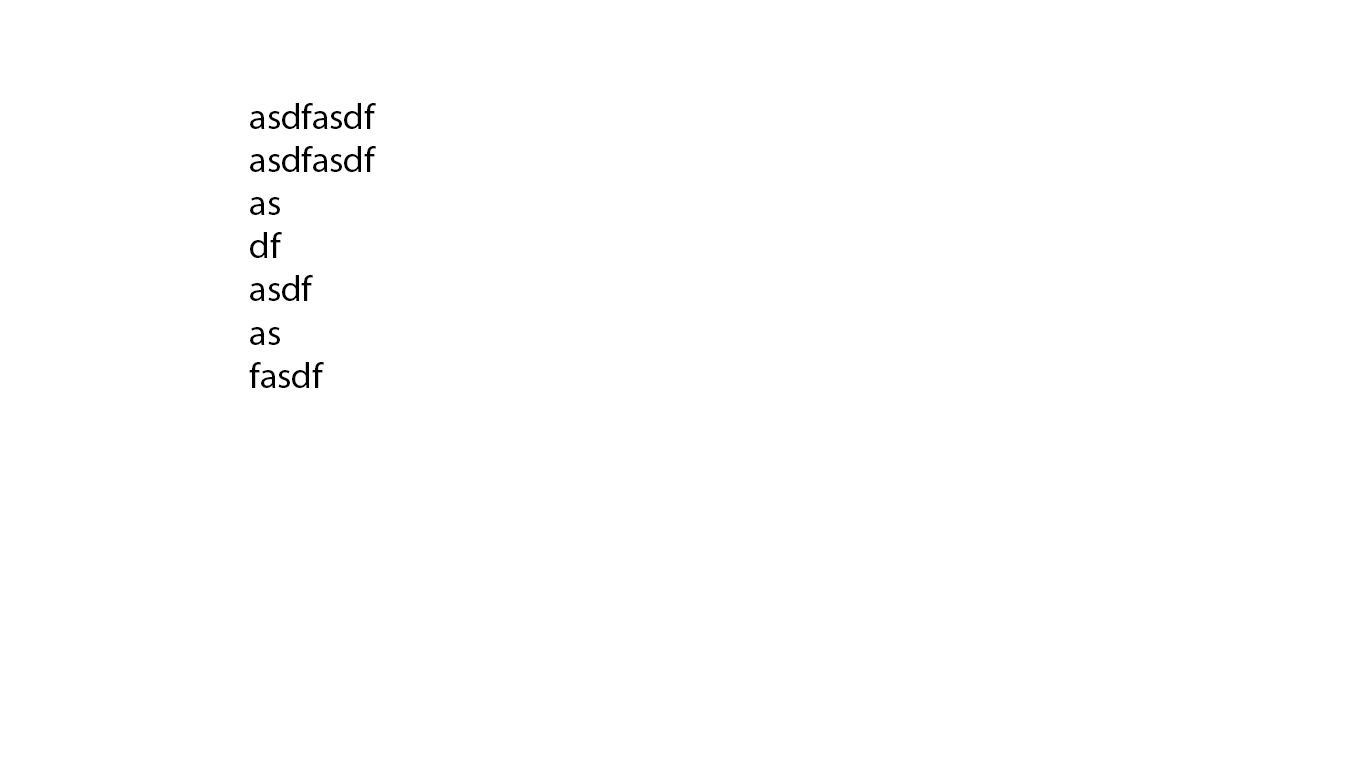
<style>
.page{position:relative;width:1366px;height:768px;background:#ffffff}
.page>*{position:absolute;margin:0}
.t1{font:36px "MyriadPro-Regular";color:#000000}
</style>
<div class="page">
<p class="t1" style="left:249px;top:103px;width:127px;height:285px">asdfasdf<br>asdfasdf<br>as<br>df<br>asdf<br>as<br>fasdf</p>
</div>
